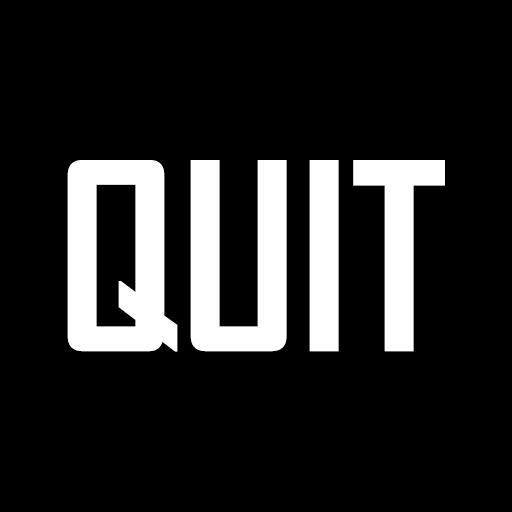
<style>
.page{position:relative;width:512px;height:512px;background:#000000}
.page>*{position:absolute;margin:0}
.t1{font:250px "AgencyFB-Bold";color:#ffffff}
</style>
<div class="page">
<p class="t1" style="left:67px;top:160px;width:378px;height:192px">QUIT</p>
</div>
